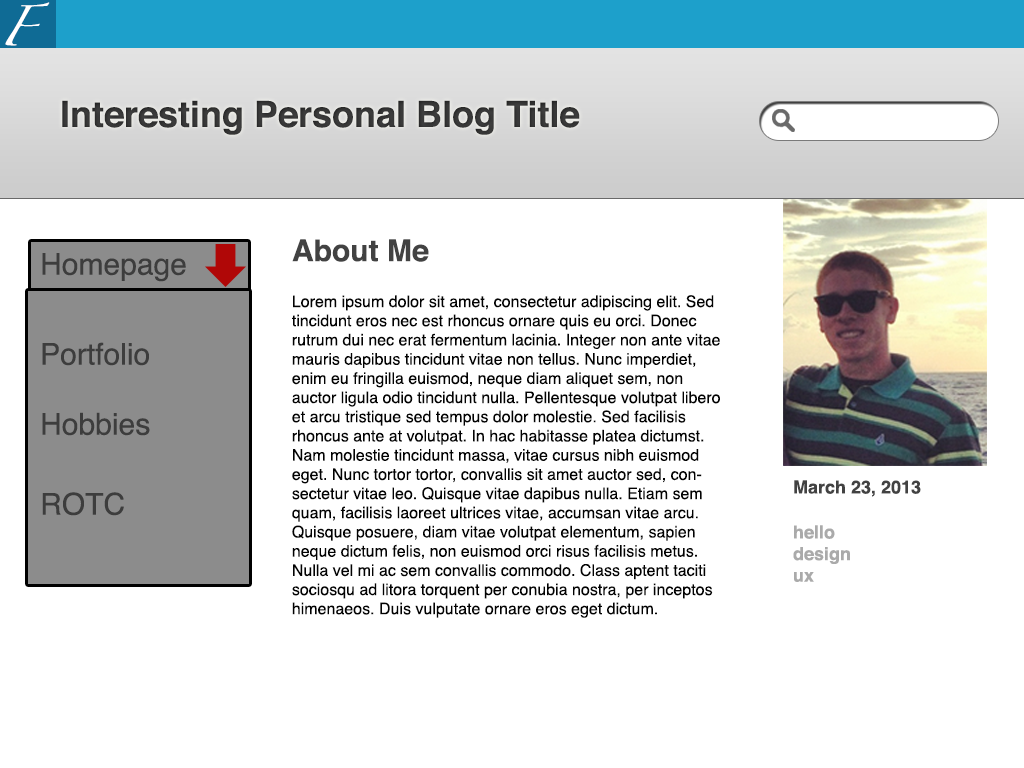
<style>
.page{position:relative;width:1024px;height:768px;background:#ffffff}
.page>*{position:absolute;margin:0}
.t1{font:36px "Zapfino";color:#ffffff}
.t2{font:36px "Helvetica-Bold";color:#424242}
.t3{font:30px "Helvetica-Bold";color:#424242}
.t4{font:30px "Helvetica";color:#3d3d3d}
.t5{font:16px "Helvetica";color:#020202}
.t6{font:18px "Helvetica-Bold";color:#424242}
.t7{font:18px "Helvetica-Bold";color:#aaaaaa}
</style>
<div class="page">
<p class="t1" style="left:5px;top:2px;width:45px;height:44px">F</p>
<p class="t2" style="left:62px;top:100px;width:518px;height:35px">Interesting Personal Blog Title</p>
<p class="t3" style="left:292px;top:239px;width:137px;height:23px">About Me</p>
<p class="t4" style="left:42px;top:253px;width:144px;height:29px">Homepage</p>
<p class="t5" style="left:292px;top:295px;width:428px;height:323px">Lorem ipsum dolor sit amet, consectetur adipiscing elit. Sed tincidunt eros nec est rhoncus ornare quis eu orci. Donec rutrum dui nec erat fermentum lacinia. Integer non ante vitae mauris dapibus tincidunt vitae non tellus. Nunc imperdiet, enim eu fringilla euismod, neque diam aliquet sem, non auctor ligula odio tincidunt nulla. Pellentesque volutpat libero et arcu tristique sed tempus dolor molestie. Sed facilisis rhoncus ante at volutpat. In hac habitasse platea dictumst. Nam molestie tincidunt massa, vitae cursus nibh euismod eget. Nunc tortor tortor, convallis sit amet auctor sed, consectetur vitae leo. Quisque vitae dapibus nulla. Etiam sem quam, facilisis laoreet ultrices vitae, accumsan vitae arcu. Quisque posuere, diam vitae volutpat elementum, sapien neque dictum felis, non euismod orci risus facilisis metus. Nulla vel mi ac sem convallis commodo. Class aptent taciti sociosqu ad litora torquent per conubia nostra, per inceptos himenaeos. Duis vulputate ornare eros eget dictum.</p>
<p class="t4" style="left:42px;top:342px;width:107px;height:24px">Portfolio</p>
<p class="t4" style="left:42px;top:412px;width:108px;height:24px">Hobbies</p>
<p class="t6" style="left:794px;top:480px;width:127px;height:17px">March 23, 2013</p>
<p class="t4" style="left:42px;top:492px;width:82px;height:24px">ROTC</p>
<p class="t7" style="left:793px;top:525px;width:57px;height:57px">hello<br>design<br>ux</p>
</div>
